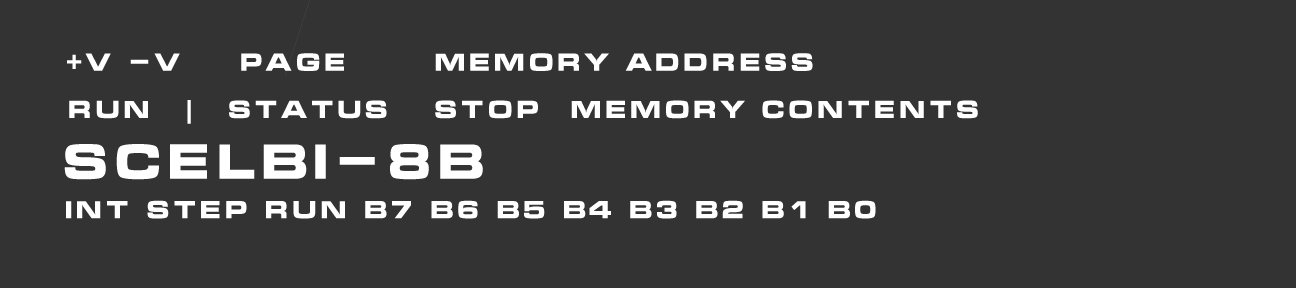
<style>
.page{position:relative;width:1296px;height:288px;background:#333333}
.page>*{position:absolute;margin:0}
.t1{font:24px "MicrogrammaBold";letter-spacing:0.075em;color:#ffffff}
.t2{font:24px "Rockwell-Bold";letter-spacing:0.075em;color:#ffffff}
.t3{font:48px "MicrogrammaBold";letter-spacing:0.075em;color:#ffffff}
</style>
<div class="page">
<p class="t1" style="left:67px;top:53px;width:746px;height:18px"><span class="t2">+</span>V -V    PAGE      MEMORY ADDRESS</p>
<p class="t1" style="left:69px;top:100px;width:909px;height:24px">RUN  <span class="t2">|</span>  STATUS   STOP  MEMORY CONTENTS</p>
<p class="t3" style="left:64px;top:144px;width:419px;height:36px">SCELBI-8B</p>
<p class="t1" style="left:66px;top:200px;width:810px;height:19px">INT STEP RUN B7 B6 B5 B4 B3 B2 B1 B0</p>
</div>
